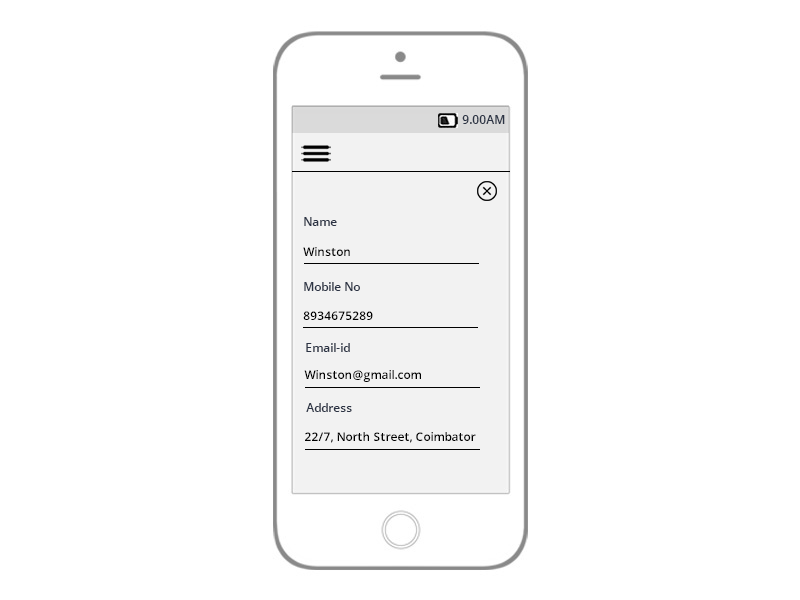
<style>
.page{position:relative;width:800px;height:600px;background:#ffffff}
.page>*{position:absolute;margin:0}
.t1{font:12px "OpenSans-Semibold";color:#2c3445}
.t2{font:12px "OpenSans-Semibold";color:#000000}
</style>
<div class="page">
<p class="t1" style="left:462px;top:115px;width:43px;height:9px">9.00AM</p>
<p class="t1" style="left:304px;top:217px;width:33px;height:9px">Name</p>
<p class="t2" style="left:303px;top:247px;width:47px;height:9px">Winston</p>
<p class="t1" style="left:304px;top:282px;width:56px;height:9px">Mobile No</p>
<p class="t2" style="left:303px;top:311px;width:70px;height:9px">8934675289</p>
<p class="t1" style="left:306px;top:343px;width:44px;height:9px">Email-id</p>
<p class="t2" style="left:304px;top:370px;width:117px;height:12px">Winston@gmail.com</p>
<p class="t1" style="left:306px;top:403px;width:46px;height:9px">Address</p>
<p class="t2" style="left:305px;top:432px;width:171px;height:11px">22/7, North Street, Coimbator</p>
</div>
